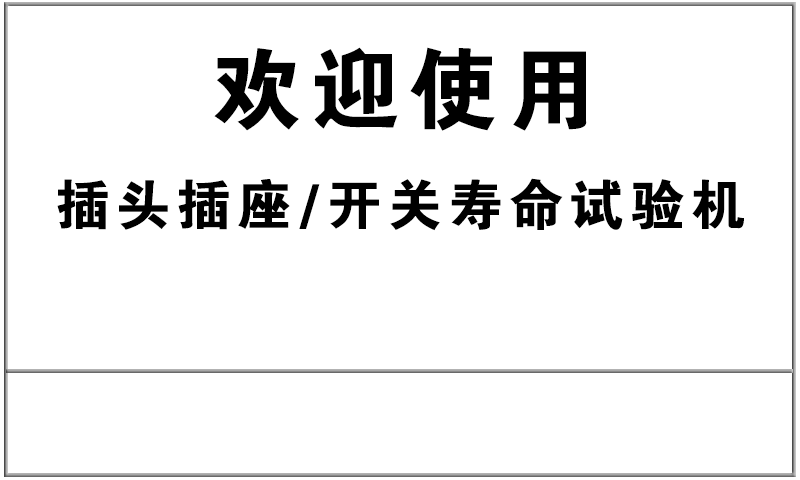
<style>
.page{position:relative;width:800px;height:480px;background:#ffffff}
.page>*{position:absolute;margin:0}
.t1{font:90px "FZDHTJW--GB1-0";letter-spacing:0.1em;color:#000000}
.t2{font:55px "FZDHTJW--GB1-0";letter-spacing:0.1em;color:#000000}
</style>
<div class="page">
<p class="t1" style="left:214px;top:47px;width:373px;height:84px">欢迎使用</p>
<p class="t2" style="left:57px;top:178px;width:687px;height:53px">插头插座/开关寿命试验机</p>
</div>
